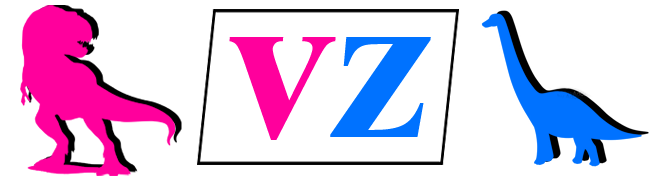
<style>
.page{position:relative;width:668px;height:180px;background:#ffffff}
.page>*{position:absolute;margin:0}
.t1{font:220px "TimesNewRomanPS-BoldMT";color:#ff009c}
.t2{font:220px "TimesNewRomanPS-BoldMT";color:#0072ff}
</style>
<div class="page">
<p class="t1" style="left:229px;top:37px;width:202px;height:103px">v<span class="t2">z</span></p>
</div>
